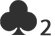
<style>
.page{position:relative;width:55px;height:36px;background:#ffffff}
.page>*{position:absolute;margin:0}
.t1{font:23.4px "MyriadPro-Regular";letter-spacing:-0.1em;color:#303030;font-weight:bold}
</style>
<div class="page">
<p class="t1" style="left:40px;top:19px;width:11px;height:17px">2</p>
</div>
